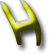
<style>
.page{position:relative;width:55px;height:55px;background:#ffffff}
.page>*{position:absolute;margin:0}
.t1{font:50px "EncoreNorScriptCasedOblique"}
</style>
<div class="page">
<p class="t1" style="left:0px;top:0px;width:42px;height:46px">H</p>
</div>
